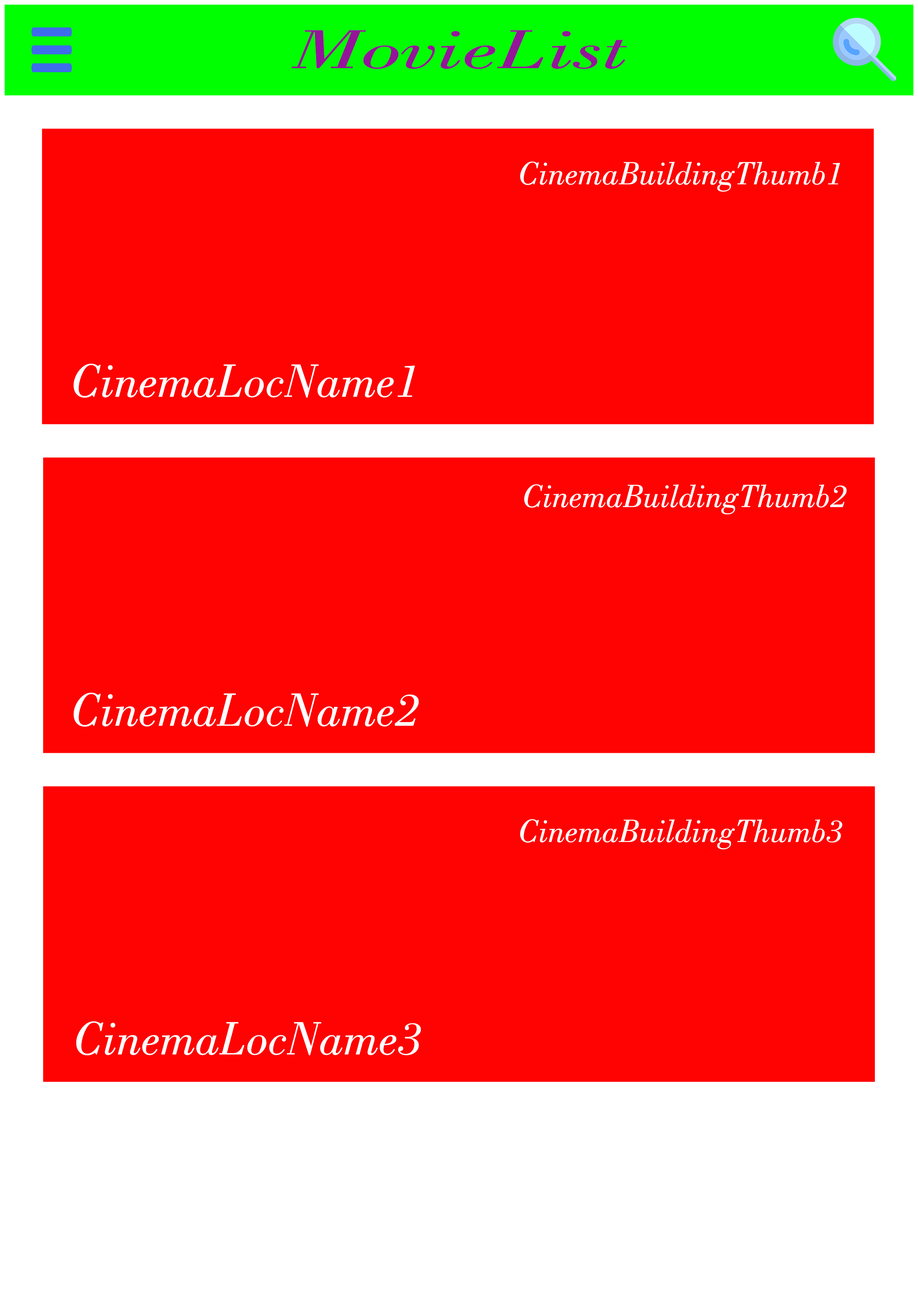
<style>
.page{position:relative;width:918px;height:1299px;background:#ff0202}
.page>*{position:absolute;margin:0}
.t1{font:58px "BodoniBT-BookItalic";color:#941499;scale:1.58 1}
.t2{font:33.9px "BodoniBT-BookItalic";color:#fefefe}
.t3{font:49.4px "BodoniBT-BookItalic";color:#fefefe}
</style>
<div class="page">
<p class="t1" style="left:292px;top:30px;width:335px;height:39px">MovieList</p>
<p class="t2" style="left:520px;top:161px;width:320px;height:31px">CinemaBuildingThumb1</p>
<p class="t3" style="left:73px;top:364px;width:342px;height:34px">CinemaLocName1</p>
<p class="t2" style="left:524px;top:484px;width:323px;height:30px">CinemaBuildingThumb2</p>
<p class="t3" style="left:74px;top:692px;width:345px;height:35px">CinemaLocName2</p>
<p class="t2" style="left:520px;top:819px;width:323px;height:30px">CinemaBuildingThumb3</p>
<p class="t3" style="left:76px;top:1021px;width:345px;height:34px">CinemaLocName3</p>
</div>
